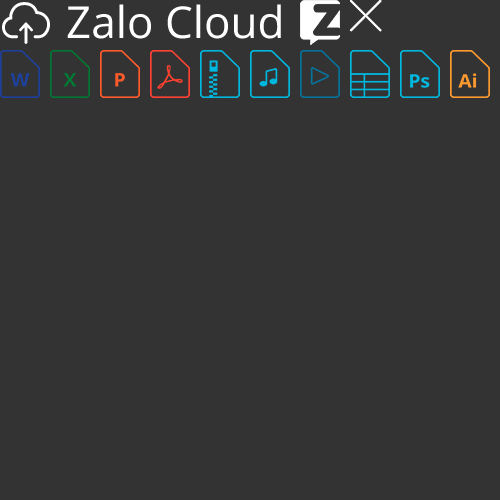
<style>
.page{position:relative;width:500px;height:500px;background:#333333}
.page>*{position:absolute;margin:0}
.t1{font:44.1px "OpenSans";color:#ffffff}
</style>
<div class="page">
<p class="t1" style="left:67px;top:4px;width:214px;height:35px">Zalo Cloud</p>
</div>
